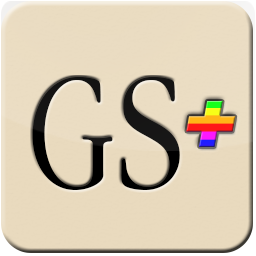
<style>
.page{position:relative;width:256px;height:256px;background:#e9dabe}
.page>*{position:absolute;margin:0}
.t1{font:170.5px "AppleGaramondLight";color:#000000;scale:0.88 1}
.t2{font:170.5px "AppleGaramondLight";color:#000000;scale:1.04 1}
.t3{font:122.5px "Beta";font-style:italic}
</style>
<div class="page">
<p class="t1" style="left:32px;top:77px;width:148px;height:113px">G<span class="t2">S</span></p>
<p class="t3" style="left:186px;top:101px;width:50px;height:46px">+</p>
</div>
